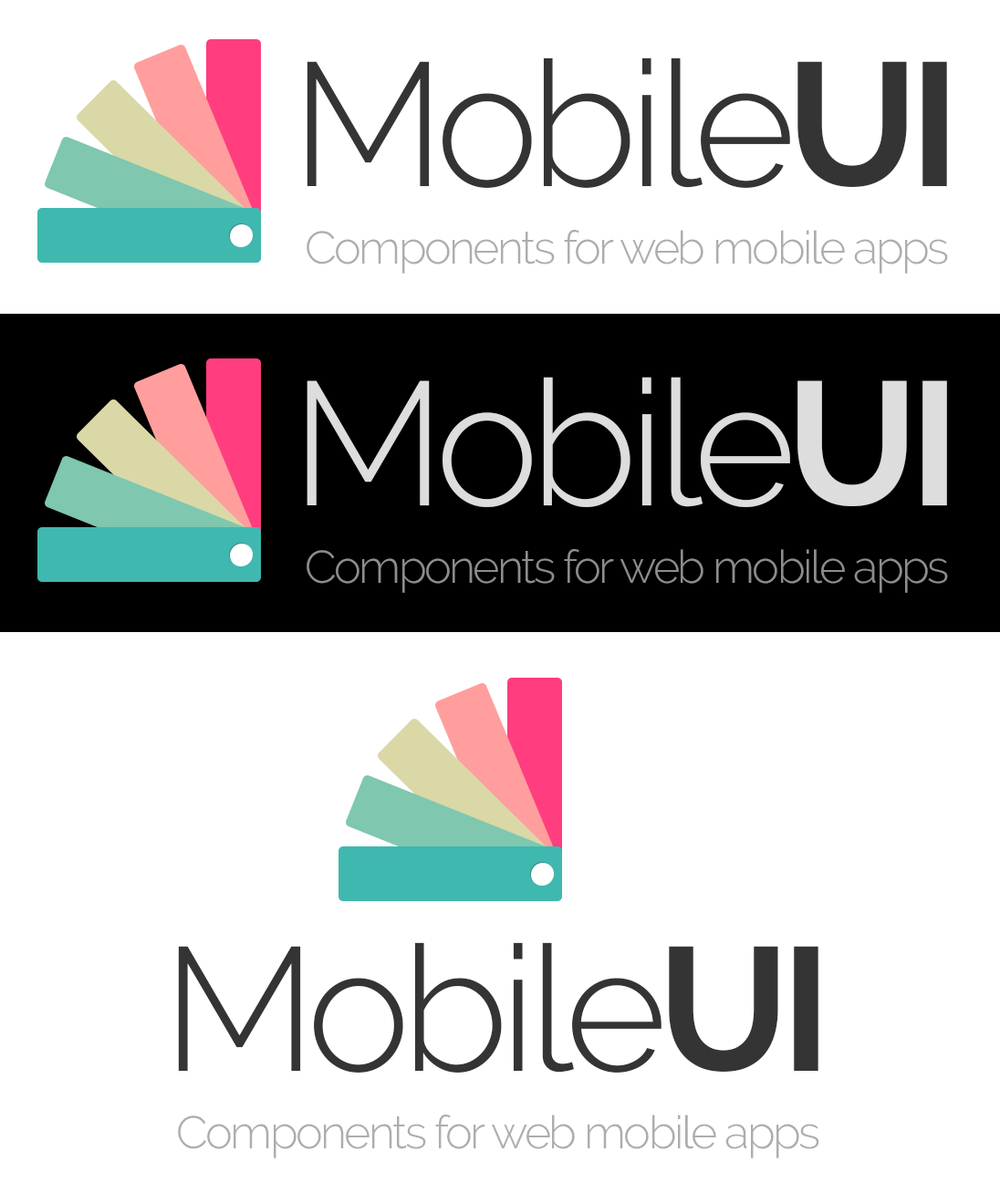
<style>
.page{position:relative;width:1000px;height:1193px;background:#ffffff}
.page>*{position:absolute;margin:0}
.t1{font:175px "Raleway-Light";letter-spacing:-0.05em;color:#343434}
.t2{font:175px "Raleway-Bold";letter-spacing:-0.05em;color:#343434}
.t3{font:45.6px "Raleway-Light";letter-spacing:-0.05em;color:#adadad}
.t4{font:175px "Raleway-Light";letter-spacing:-0.05em;color:#dddddd}
.t5{font:175px "Raleway-Bold";letter-spacing:-0.05em;color:#dddddd}
.t6{font:45.6px "Raleway-Light";letter-spacing:-0.05em;color:#8d8d8d}
</style>
<div class="page">
<p class="t1" style="left:306px;top:57px;width:641px;height:131px">Mobile<span class="t2">UI</span></p>
<p class="t3" style="left:306px;top:230px;width:642px;height:44px">Components for web mobile apps</p>
<p class="t4" style="left:306px;top:377px;width:641px;height:130px">Mobile<span class="t5">UI</span></p>
<p class="t6" style="left:306px;top:549px;width:642px;height:44px">Components for web mobile apps</p>
<p class="t1" style="left:178px;top:942px;width:640px;height:131px">Mobile<span class="t2">UI</span></p>
<p class="t3" style="left:178px;top:1114px;width:641px;height:44px">Components for web mobile apps</p>
</div>
